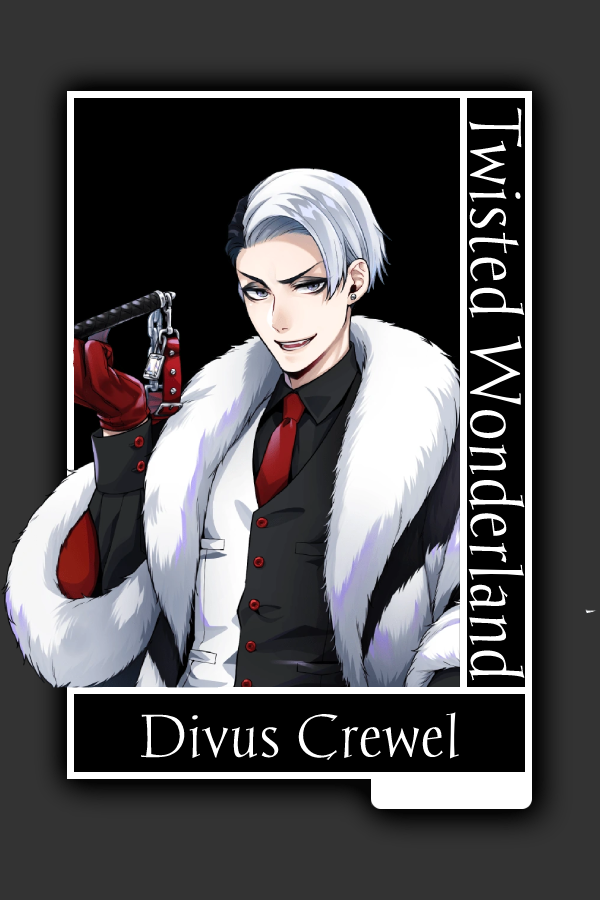
<style>
.page{position:relative;width:600px;height:900px;background:#000000}
.page>*{position:absolute;margin:0}
.t1{font:60px "Chantelli-Antiqua";color:#ffffff}
.t2{font:50px "Chantelli-Antiqua";color:#ffffff}
</style>
<div class="page">
<p class="t1" style="left:468px;top:107px;width:57px;height:574px;rotate:90deg">Twisted Wonderland</p>
<p class="t2" style="left:141px;top:712px;width:318px;height:48px">Divus Crewel</p>
</div>
